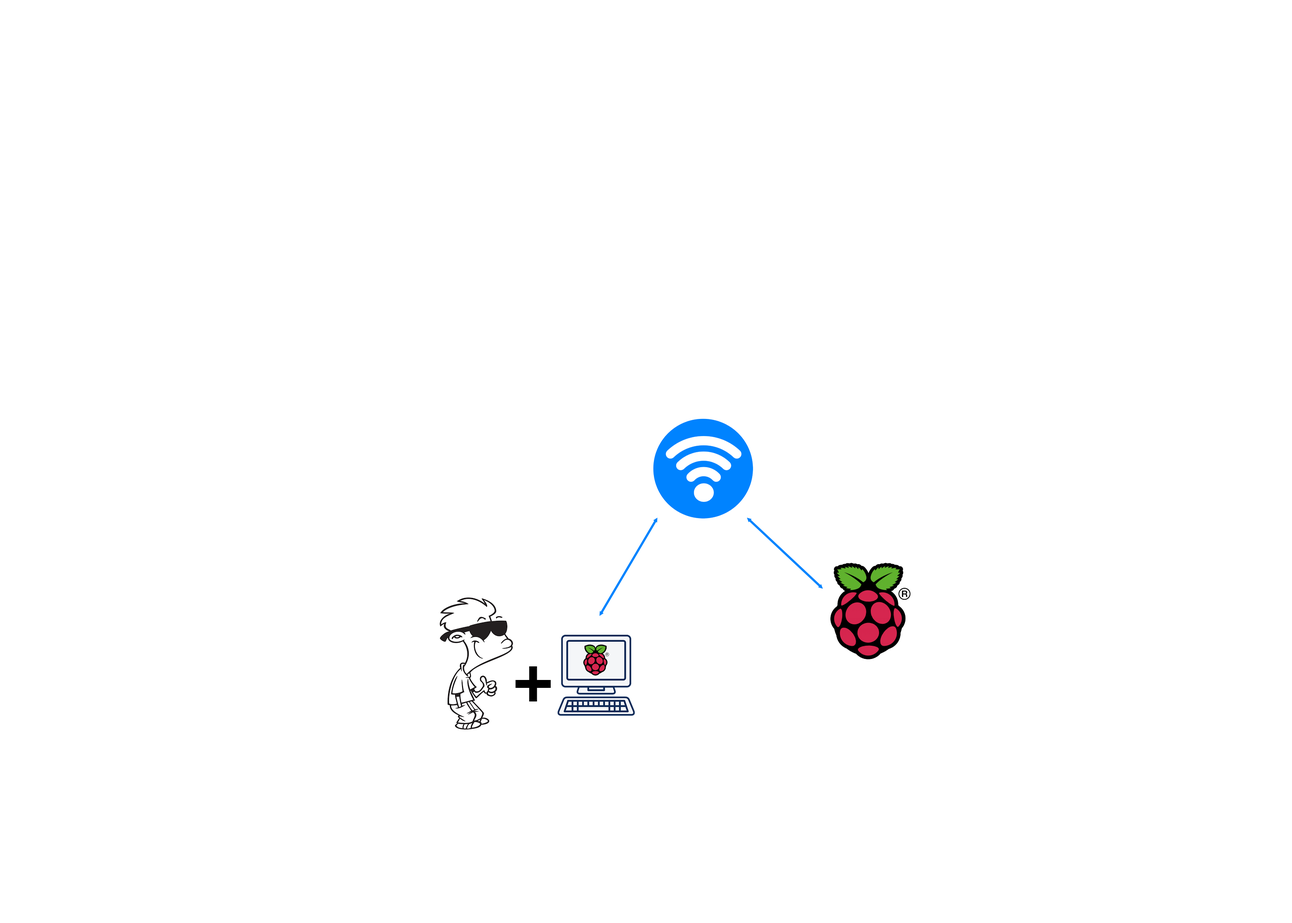
<style>
.page{position:relative;width:1292px;height:923px;background:#ffffff}
.page>*{position:absolute;margin:0}
.t1{font:80.3px "TrebuchetMS-Bold";color:#000000}
</style>
<div class="page">
<p class="t1" style="left:515px;top:666px;width:36px;height:36px">+</p>
</div>
